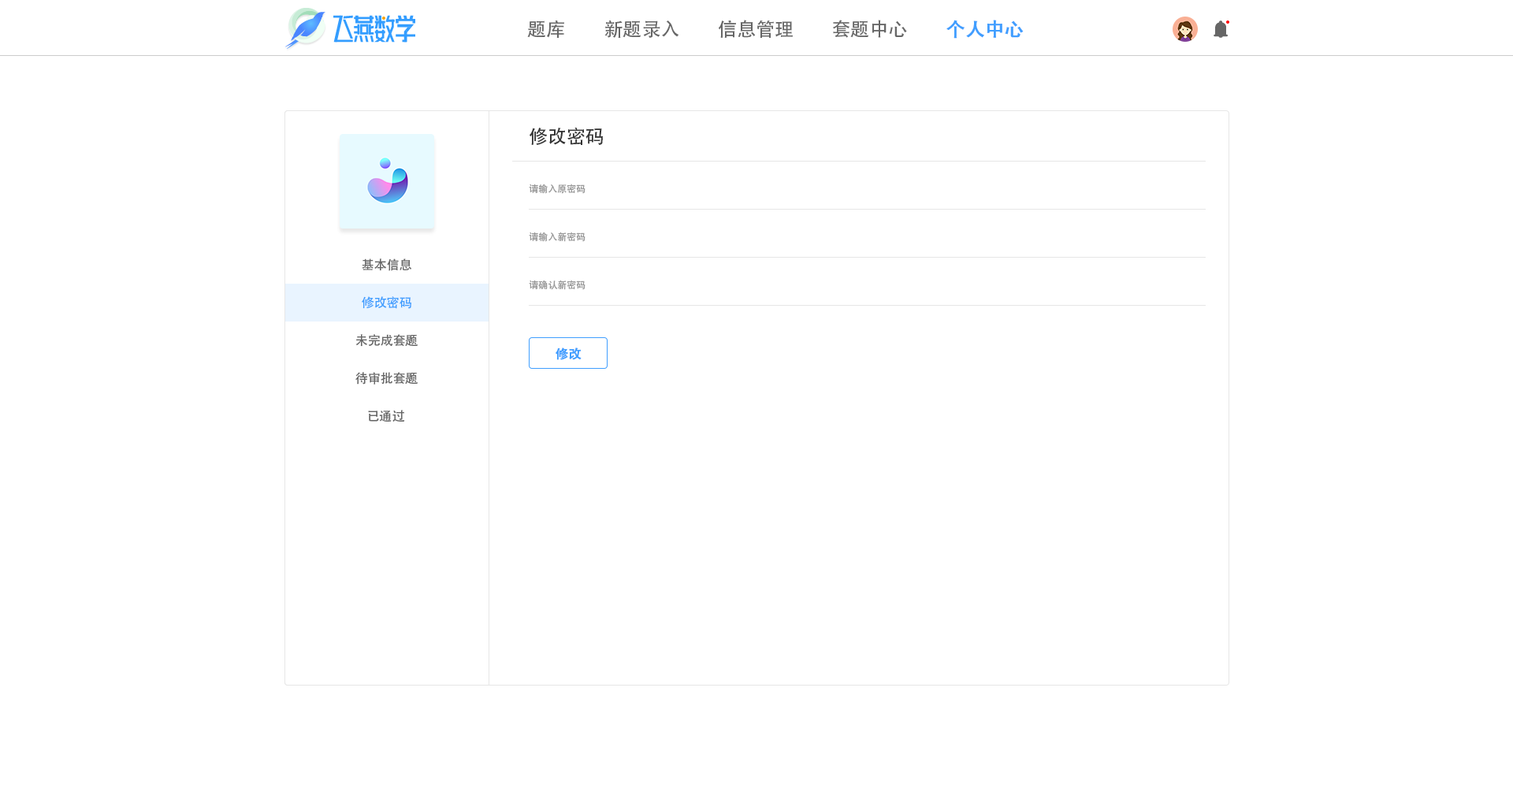
<style>
.page{position:relative;width:1513px;height:788px;background:#ffffff}
.page>*{position:absolute;margin:0}
.t1{font:18.9px "AdobeHeitiStd-Regular";color:#666666}
.t2{font:18.9px "AdobeHeitiStd-Regular";color:#409eff;font-weight:bold}
.t3{font:18.9px "AdobeHeitiStd-Regular";color:#333333}
.t4{font:9.5px "AdobeHeitiStd-Regular";color:#999999}
.t5{font:12.6px "AdobeHeitiStd-Regular";color:#666666}
.t6{font:12.6px "AdobeHeitiStd-Regular";color:#409eff}
.t7{font:12.6px "AdobeHeitiStd-Regular";color:#409eff;font-weight:bold}
</style>
<div class="page">
<p class="t1" style="left:527px;top:20px;width:37px;height:18px">题库</p>
<p class="t1" style="left:604px;top:20px;width:75px;height:18px">新题录入</p>
<p class="t1" style="left:718px;top:20px;width:75px;height:19px">信息管理</p>
<p class="t1" style="left:833px;top:20px;width:74px;height:18px">套题中心</p>
<p class="t2" style="left:946px;top:20px;width:78px;height:19px">个人中心</p>
<p class="t3" style="left:529px;top:128px;width:74px;height:17px">修改密码</p>
<p class="t4" style="left:529px;top:184px;width:57px;height:10px">请输入原密码</p>
<p class="t4" style="left:529px;top:232px;width:57px;height:10px">请输入新密码</p>
<p class="t5" style="left:362px;top:258px;width:50px;height:13px">基本信息</p>
<p class="t4" style="left:529px;top:280px;width:57px;height:10px">请确认新密码</p>
<p class="t6" style="left:362px;top:296px;width:49px;height:13px">修改密码</p>
<p class="t5" style="left:355px;top:334px;width:63px;height:13px">未完成套题</p>
<p class="t7" style="left:556px;top:348px;width:26px;height:12px">修改</p>
<p class="t5" style="left:355px;top:372px;width:63px;height:13px">待审批套题</p>
<p class="t5" style="left:368px;top:410px;width:37px;height:12px">已通过</p>
</div>
